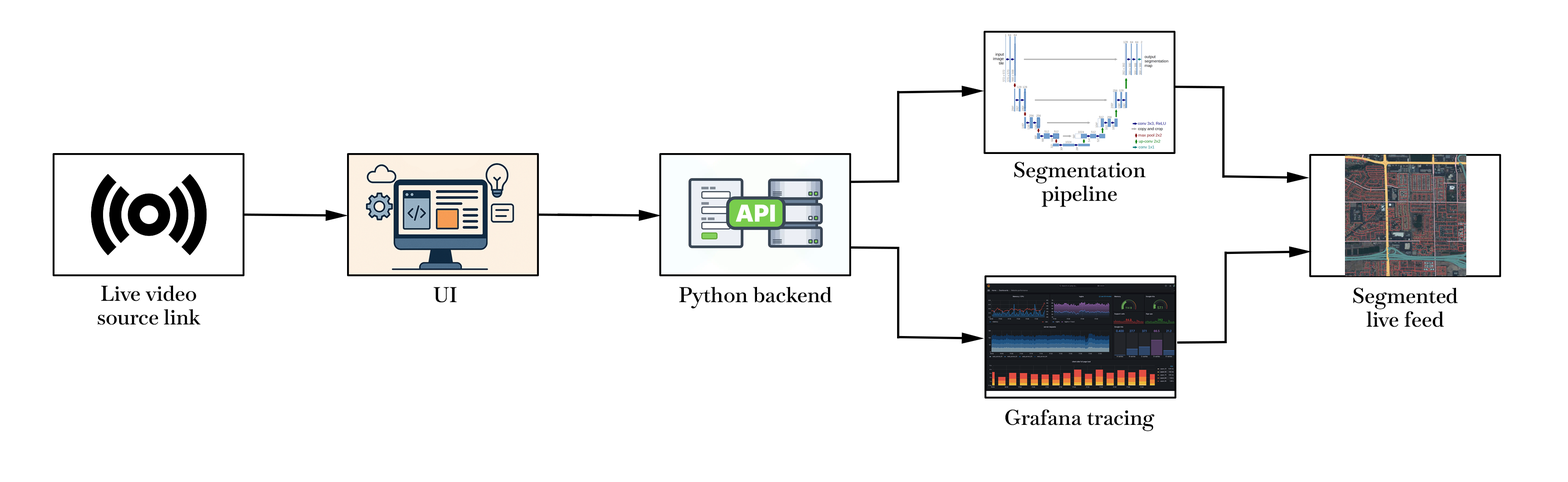
<style>
.page{position:relative;width:1568px;height:482px;background:#ffffff}
.page>*{position:absolute;margin:0}
.t1{font:21.2px/23.6px "Baskervville-SemiBold";color:#000000}
.t2{font:21.2px "Baskervville-SemiBold";color:#000000}
</style>
<div class="page">
<p class="t1" style="left:1014px;top:161px;width:132px;height:46px;text-align:center">Segmentation<br>pipeline</p>
<p class="t1" style="left:98px;top:285px;width:103px;height:40px;text-align:center">Live video<br>source link</p>
<p class="t2" style="left:434px;top:287px;width:23px;height:15px">UI</p>
<p class="t2" style="left:679px;top:286px;width:153px;height:22px">Python backend</p>
<p class="t1" style="left:1353px;top:287px;width:105px;height:40px;text-align:center">Segmented<br>live feed</p>
<p class="t2" style="left:1005px;top:409px;width:149px;height:22px">Grafana tracing</p>
</div>
